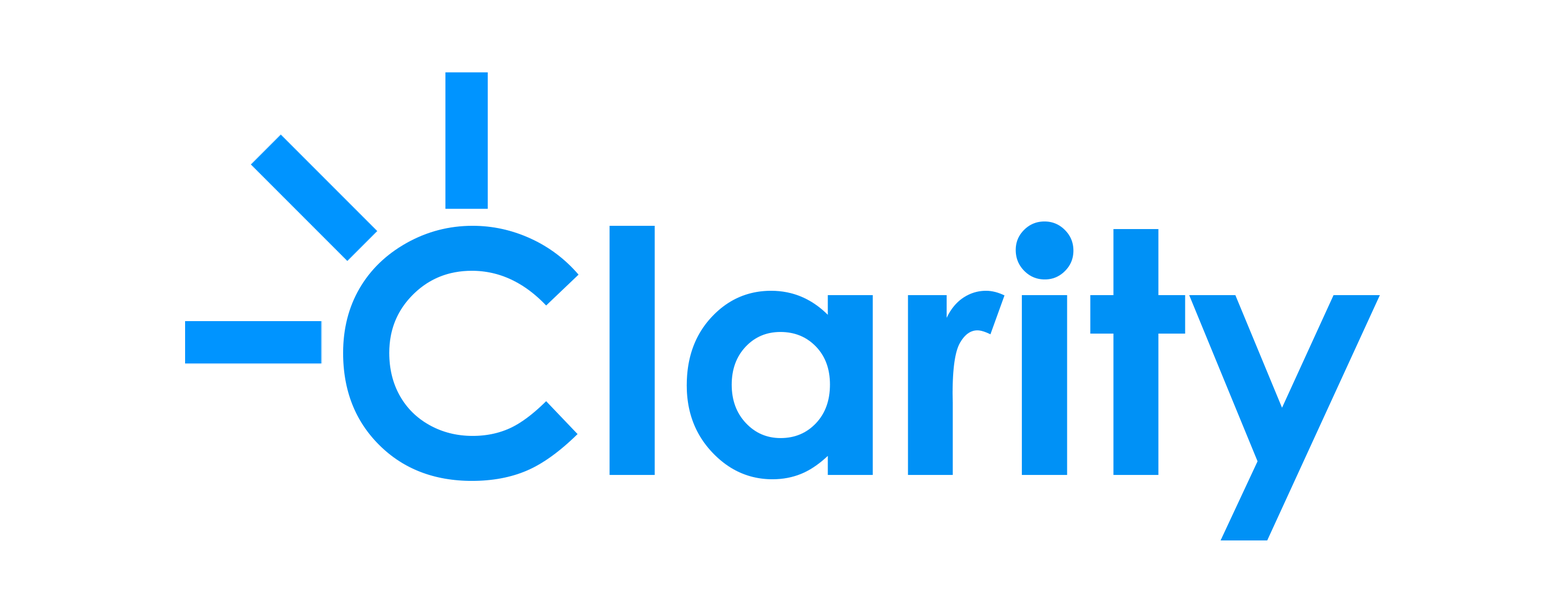
<style>
.page{position:relative;width:1568px;height:613px;background:#ffffff}
.page>*{position:absolute;margin:0}
.t1{font:338.3px "CenturyGothic-Bold";color:#0091f6}
</style>
<div class="page">
<p class="t1" style="left:343px;top:221px;width:1037px;height:319px">Clarity</p>
</div>
